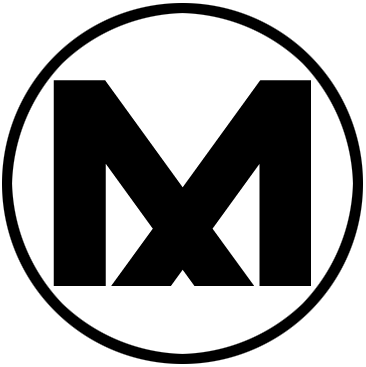
<style>
.page{position:relative;width:366px;height:367px;background:#ffffff}
.page>*{position:absolute;margin:0}
.t1{font:266.7px "Kontanter-Bold";letter-spacing:0.03em;color:#000000;scale:1.25 1}
</style>
<div class="page">
<p class="t1" style="left:53px;top:80px;width:258px;height:206px">M</p>
</div>
